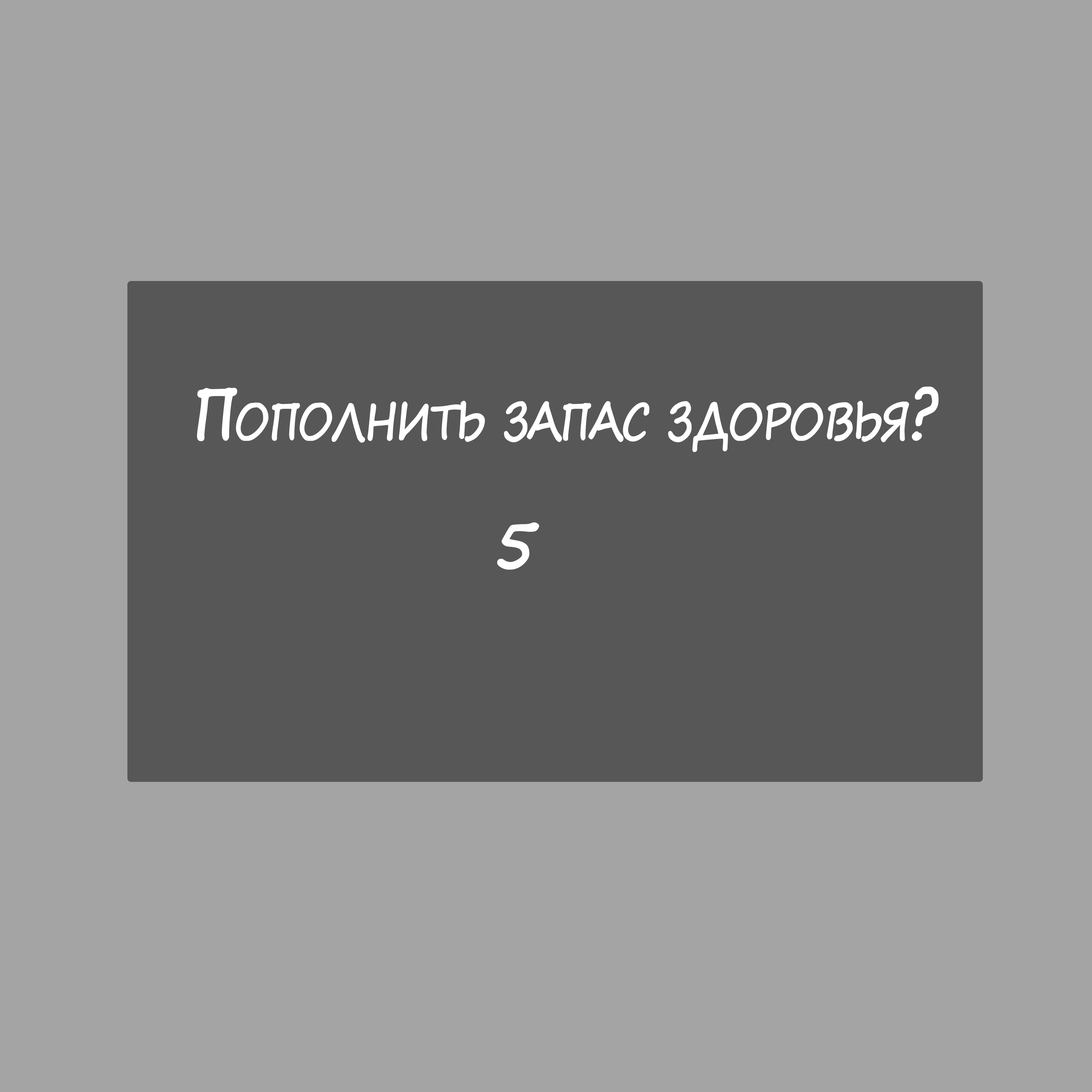
<style>
.page{position:relative;width:1092px;height:1092px;background:#a4a4a4}
.page>*{position:absolute;margin:0}
.t1{font:71.1px "SegoePrint-Bold";letter-spacing:-0.06em;color:#ffffff;font-variant:small-caps;scale:0.82 1}
</style>
<div class="page">
<p class="t1" style="left:197px;top:386px;width:742px;height:66px">Пополнить запас здоровья?</p>
<p class="t1" style="left:497px;top:522px;width:42px;height:48px">5</p>
</div>
